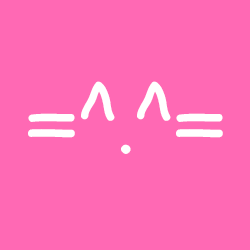
<style>
.page{position:relative;width:250px;height:250px;background:#ff69b4}
.page>*{position:absolute;margin:0}
.t1{font:96px "Schoolbell";letter-spacing:0.025em;color:#ffffff}
</style>
<div class="page">
<p class="t1" style="left:28px;top:81px;width:195px;height:73px">=^.^=</p>
</div>
